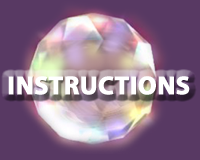
<style>
.page{position:relative;width:200px;height:160px;background:#583963}
.page>*{position:absolute;margin:0}
.t1{font:26px "MyriadPro-Bold";color:#ffffff;font-weight:bold}
</style>
<div class="page">
<p class="t1" style="left:8px;top:76px;width:182px;height:19px">INSTRUCTIONS</p>
</div>
